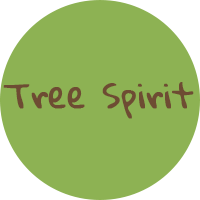
<style>
.page{position:relative;width:200px;height:200px;background:#8db253}
.page>*{position:absolute;margin:0}
.t1{font:33.3px "GloriaHallelujah";color:#6e4c33;font-weight:bold}
</style>
<div class="page">
<p class="t1" style="left:3px;top:82px;width:191px;height:37px">Tree Spirit</p>
</div>
